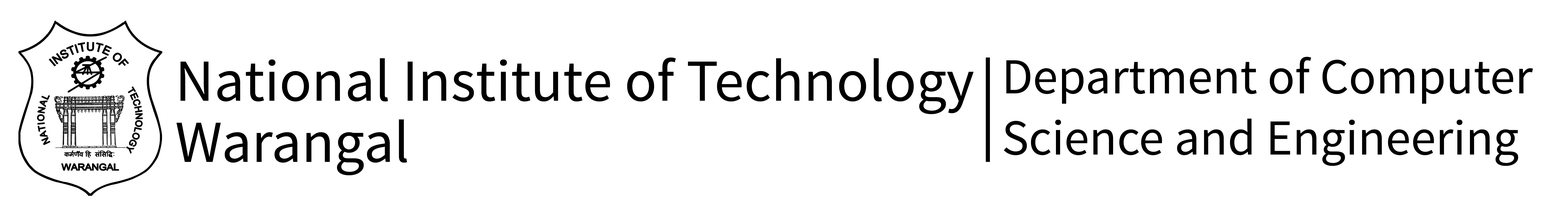
<style>
.page{position:relative;width:1568px;height:214px;background:#ffffff}
.page>*{position:absolute;margin:0}
.t1{font:59.7px/30.6px "SourceSansPro-Regular";color:#000000}
.t2{font:50.5px/30.7px "SourceSansPro-Regular";color:#000000}
</style>
<div class="page">
<p class="t1" style="left:176px;top:58px;width:798px;height:118px">National Institute of Technology <br><br>Warangal</p>
<p class="t2" style="left:1004px;top:57px;width:529px;height:109px">Department of Computer <br><br>Science and Engineering</p>
</div>
